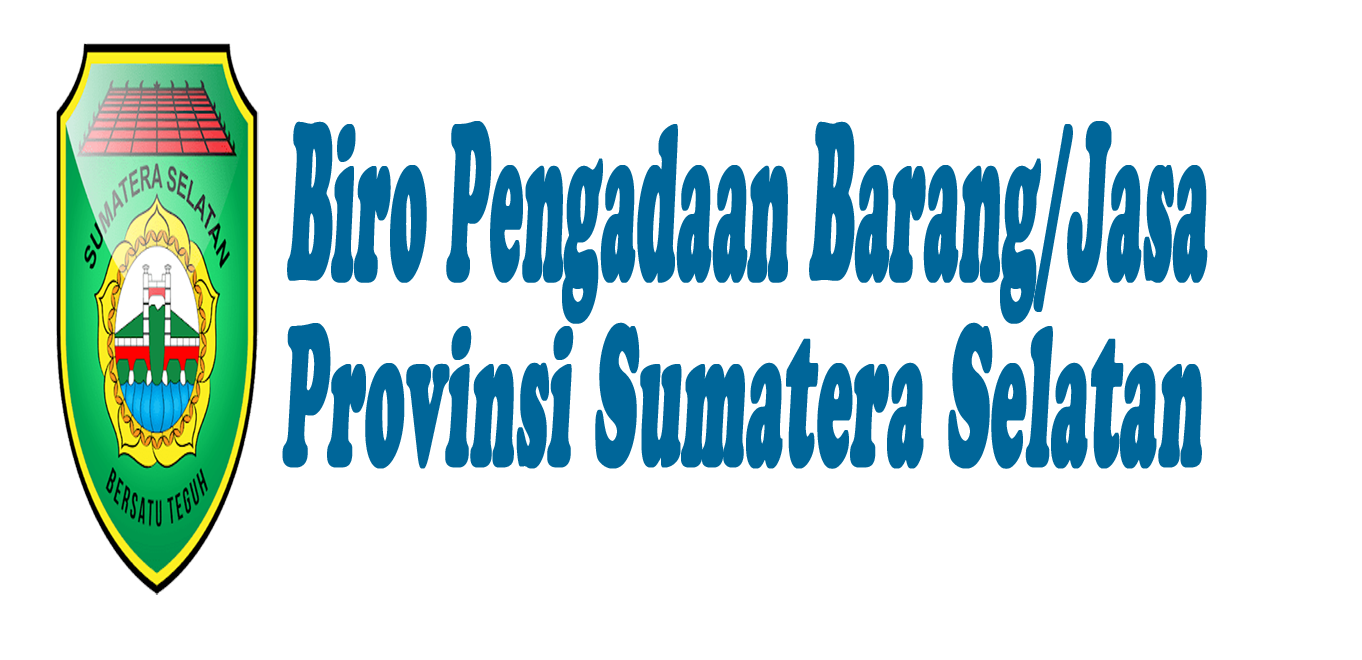
<style>
.page{position:relative;width:1362px;height:660px;background:#ffffff}
.page>*{position:absolute;margin:0}
.t1{font:218.1px "CooperBlackStd";color:#006699;font-weight:bold;font-style:italic;scale:0.26 1}
.t2{font:194.9px "CooperBlackStd";color:#006699;font-weight:bold;font-style:italic;scale:0.31 1}
</style>
<div class="page">
<p class="t1" style="left:287px;top:121px;width:921px;height:203px">Biro Pengadaan Barang/Jasa</p>
<p class="t2" style="left:282px;top:322px;width:920px;height:147px">Provinsi Sumatera Selatan</p>
</div>
